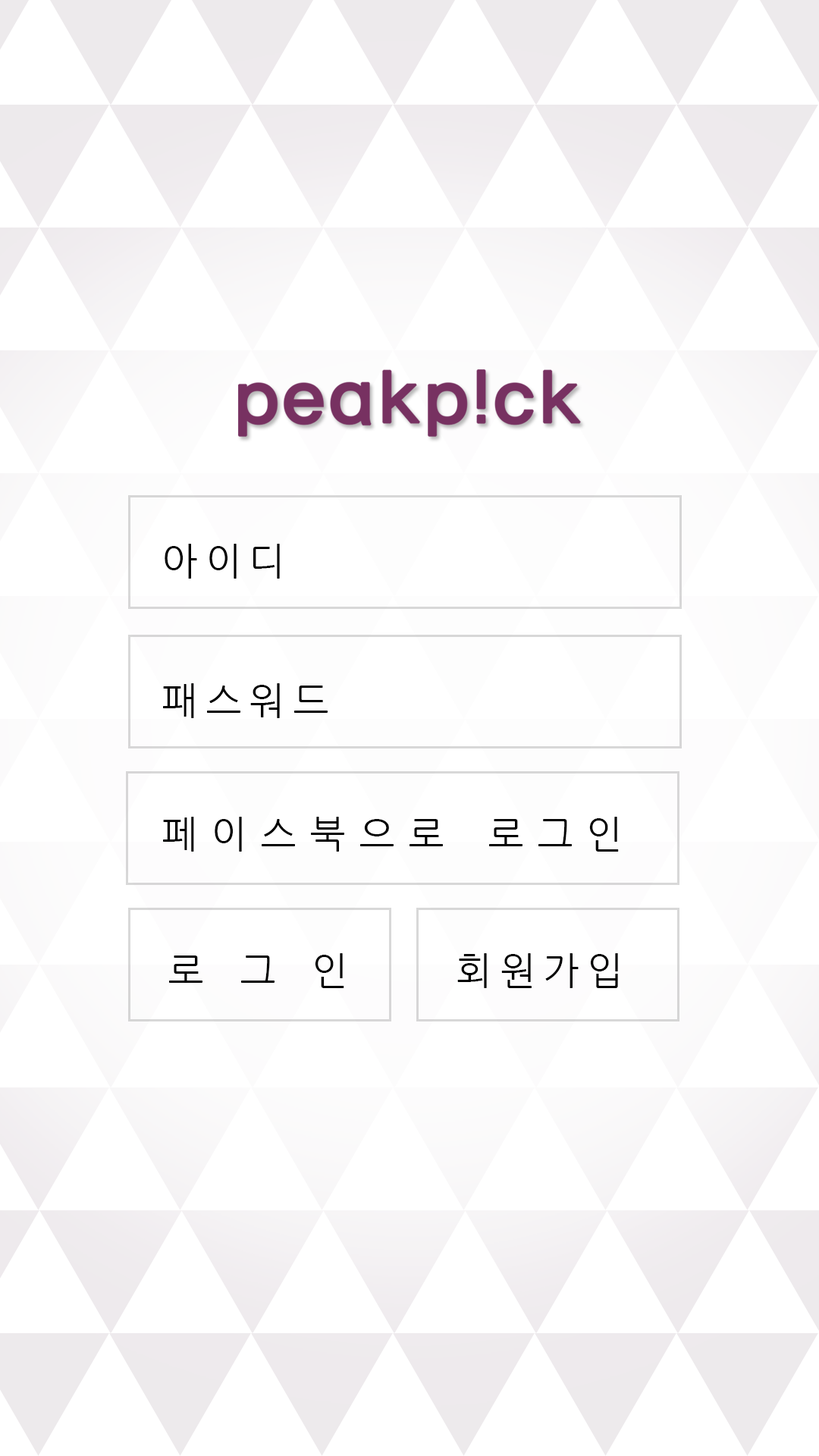
<style>
.page{position:relative;width:819px;height:1456px;background:#ffffff}
.page>*{position:absolute;margin:0}
.t1{font:37.9px "NanumGothicCoding";letter-spacing:0.15em;color:#000000}
.t2{font:37.9px "NanumGothicCoding";letter-spacing:0.3em;color:#000000}
.t3{font:37.9px "NanumGothicCoding";letter-spacing:0.2em;color:#000000}
</style>
<div class="page">
<p class="t1" style="left:165px;top:544px;width:115px;height:35px">아이디</p>
<p class="t1" style="left:163px;top:683px;width:165px;height:35px">패스워드</p>
<p class="t2" style="left:163px;top:817px;width:456px;height:35px">페이스북으로 로그인</p>
<p class="t3" style="left:169px;top:953px;width:175px;height:35px">로 그 인</p>
<p class="t1" style="left:457px;top:953px;width:161px;height:35px">회원가입</p>
</div>
